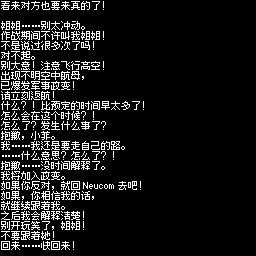
<style>
.page{position:relative;width:256px;height:256px;background:#000000}
.page>*{position:absolute;margin:0}
.t1{font:10px/10px "Fusion-Pixel-10px-Proportional-zh_hans-Regular";color:#ffffff}
</style>
<div class="page">
<p class="t1" style="left:1px;top:1px;width:143px;height:249px">看来对方也要来真的了！<br><br>姐姐……别太冲动。<br>作战期间不许叫我姐姐！<br>不是说过很多次了吗！<br>对不起。<br>别大意！注意飞行高空！<br>出现不明空中航母，<br>已爆发军事政变！<br>请立刻返航！<br>什么？！比预定的时间早太多了！<br>怎么会在这个时候？！<br>怎么了？发生什么事了？<br>抱歉，小菲。<br>我……我还是要走自己的路。<br>……什么意思？怎么了？！<br>抱歉……没时间解释了。<br>我将加入政变。<br>如果你反对，就回Neucom去吧！<br>如果，你相信我的话，<br>就继续跟着我。<br>之后我会解释清楚！<br>别开玩笑了，姐姐！<br>不要跟着她！<br>回来……快回来！</p>
</div>
